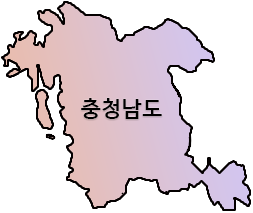
<style>
.page{position:relative;width:253px;height:213px;background:#ffffff}
.page>*{position:absolute;margin:0}
.t1{font:22px "HancomGothicBold";color:#000000}
</style>
<div class="page">
<p class="t1" style="left:81px;top:98px;width:81px;height:21px">충청남도</p>
</div>
